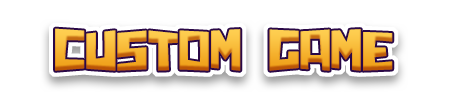
<style>
.page{position:relative;width:449px;height:100px;background:#ffffff}
.page>*{position:absolute;margin:0}
.t1{font:57.5px "Chunq";color:#fecc44;scale:0.96 1}
</style>
<div class="page">
<p class="t1" style="left:55px;top:28px;width:338px;height:43px">CUSTOM  GAME</p>
</div>
